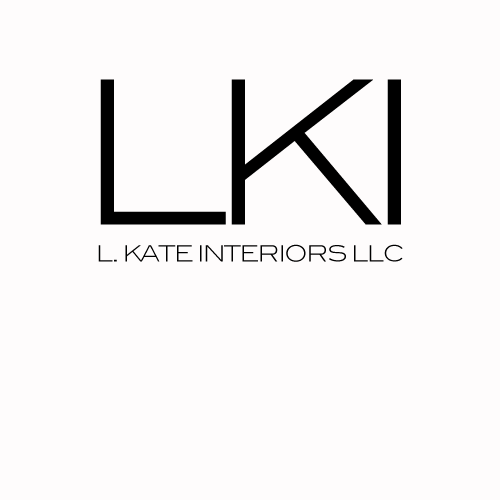
<style>
.page{position:relative;width:500px;height:500px;background:#fefcfc}
.page>*{position:absolute;margin:0}
.t1{font:200px "BlairITCTTLight";letter-spacing:-0.1em;color:#000000}
.t2{font:22px "BlairITCTTLight";letter-spacing:-0.05em;color:#000000}
</style>
<div class="page">
<p class="t1" style="left:100px;top:79px;width:301px;height:146px">LKI</p>
<p class="t2" style="left:98px;top:244px;width:305px;height:18px">L. KATE INTERIORS LLC</p>
</div>
